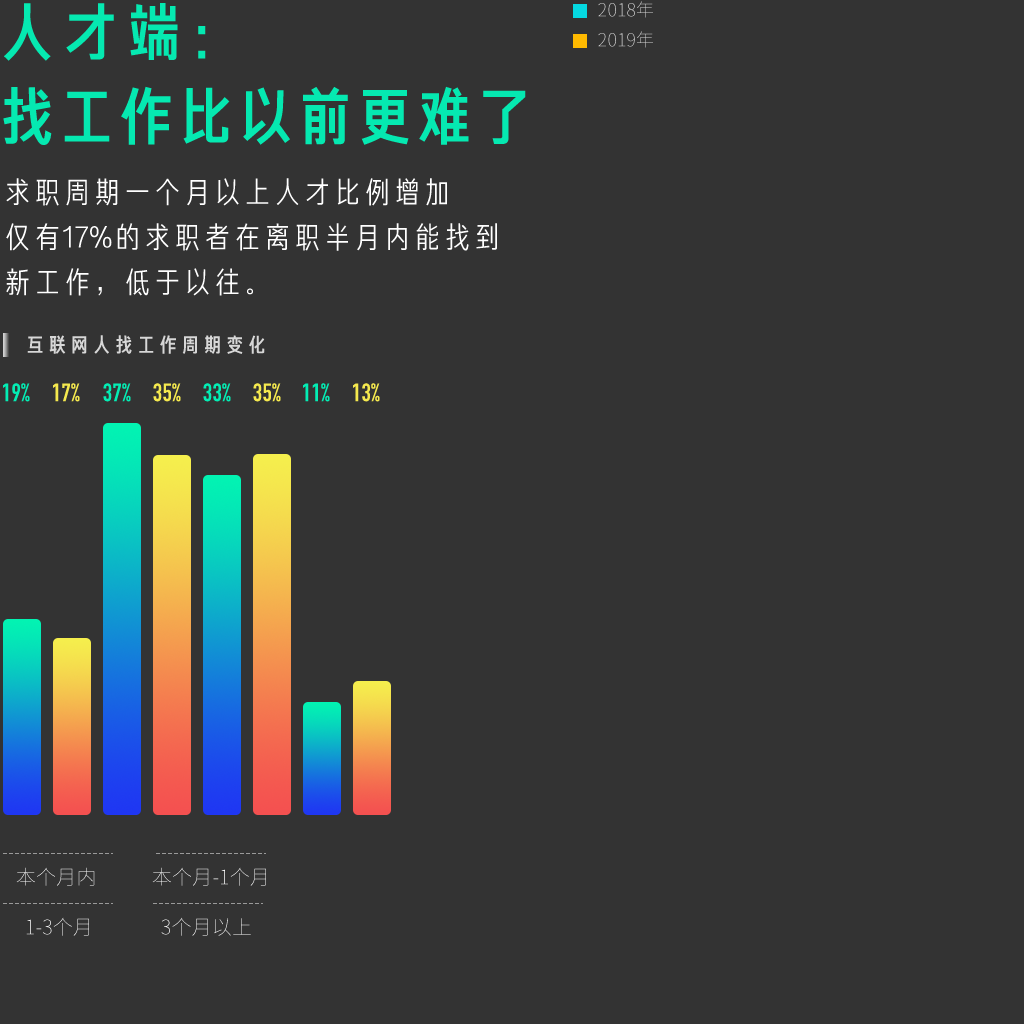
<style>
.page{position:relative;width:1024px;height:1024px;background:#333333}
.page>*{position:absolute;margin:0}
.t1{font:63.4px "FZCJHJW--GB1-0";color:#05e9b1}
.t2{font:18px "SourceHanSansCN-ExtraLight";letter-spacing:0.01em}
.t3{font:63.4px "FZCJHJW--GB1-0";letter-spacing:-0.06em;color:#05e9b1}
.t4{font:30px "FZJHJW--GB1-0";color:#ffffff}
.t5{font:20.2px "FZCJHJW--GB1-0";letter-spacing:0.1em;color:#d7d7d7}
.t6{font:25px "DINCondensed-Bold";letter-spacing:0.01em;color:#03edb4}
.t7{font:25px "DINCondensed-Bold";letter-spacing:0.01em;color:#f5e94d}
.t8{font:20px "SourceHanSansCN-ExtraLight";letter-spacing:0.01em}
.t9{font:20px "SourceHanSansCN-ExtraLight";letter-spacing:0.01em;color:#ffffff}
</style>
<div class="page">
<p class="t1" style="left:4px;top:3px;width:202px;height:58px">人才端：</p>
<p class="t2" style="left:598px;top:1px;width:55px;height:17px">2018年</p>
<p class="t2" style="left:598px;top:31px;width:55px;height:17px">2019年</p>
<p class="t3" style="left:3px;top:86px;width:523px;height:59px">找工作比以前更难了</p>
<p class="t4" style="left:6px;top:178px;width:441px;height:28px">求职周期一个月以上人才比例增加</p>
<p class="t4" style="left:6px;top:223px;width:491px;height:28px">仅有17%的求职者在离职半月内能找到</p>
<p class="t4" style="left:6px;top:268px;width:247px;height:28px">新工作，低于以往。</p>
<p class="t5" style="left:27px;top:335px;width:238px;height:19px">互联网人找工作周期变化</p>
<p class="t6" style="left:3px;top:383px;width:27px;height:19px">19%</p>
<p class="t7" style="left:53px;top:383px;width:27px;height:19px">17%</p>
<p class="t6" style="left:103px;top:383px;width:28px;height:19px">37%</p>
<p class="t7" style="left:153px;top:383px;width:28px;height:19px">35%</p>
<p class="t6" style="left:203px;top:383px;width:28px;height:19px">33%</p>
<p class="t7" style="left:253px;top:383px;width:28px;height:19px">35%</p>
<p class="t6" style="left:303px;top:383px;width:27px;height:19px">11%</p>
<p class="t7" style="left:353px;top:383px;width:27px;height:19px">13%</p>
<p class="t8" style="left:16px;top:867px;width:79px;height:19px">本个月内</p>
<p class="t9" style="left:152px;top:867px;width:114px;height:19px">本个月-1个月</p>
<p class="t9" style="left:26px;top:917px;width:63px;height:19px">1-3个月</p>
<p class="t9" style="left:161px;top:917px;width:90px;height:19px">3个月以上</p>
</div>
